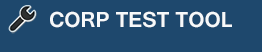
<style>
.page{position:relative;width:262px;height:52px;background:#1e486d}
.page>*{position:absolute;margin:0}
.t1{font:22.7px "Gautami-Bold";color:#f7f9fa}
</style>
<div class="page">
<p class="t1" style="left:50px;top:11px;width:182px;height:17px">CORP TEST TOOL</p>
</div>
